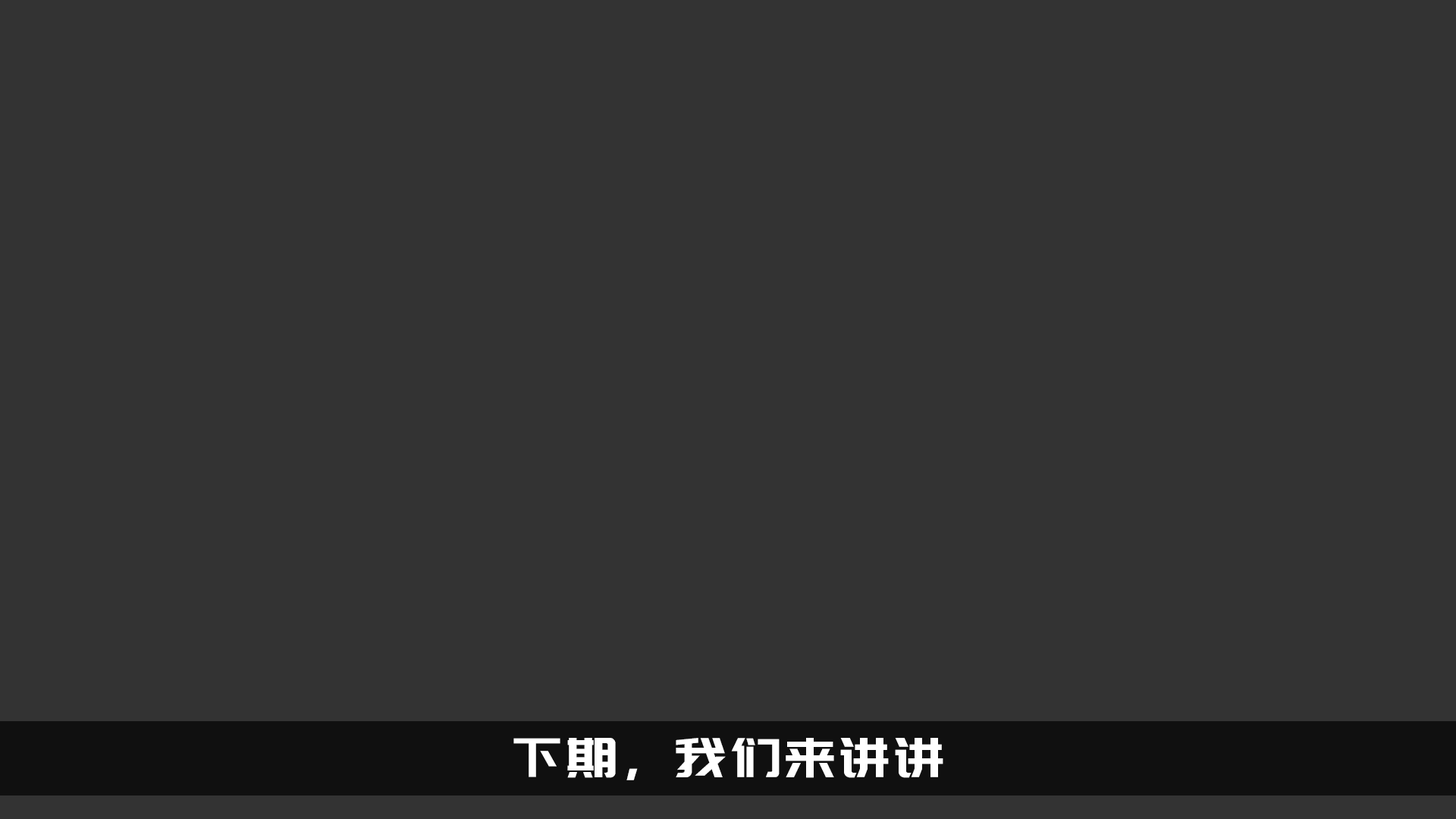
<style>
.page{position:relative;width:1456px;height:819px;background:#333333}
.page>*{position:absolute;margin:0}
.t1{font:54.6px "PangMenZhengDao-3";color:#ffffff}
</style>
<div class="page">
<p class="t1" style="left:513px;top:738px;width:430px;height:42px">下期，我们来讲讲</p>
</div>
